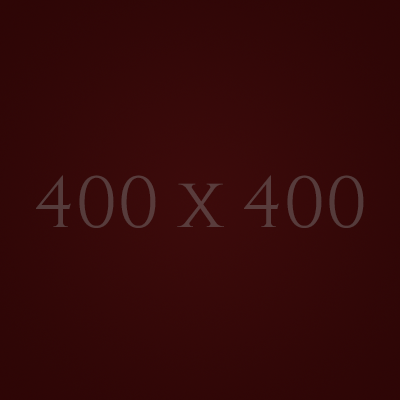
<style>
.page{position:relative;width:400px;height:400px}
.page>*{position:absolute;margin:0}
.t1{font:72px "Cinzel-Regular";color:#573c3c}
</style>
<div class="page">
<p class="t1" style="left:36px;top:175px;width:328px;height:53px">400 x 400</p>
</div>
